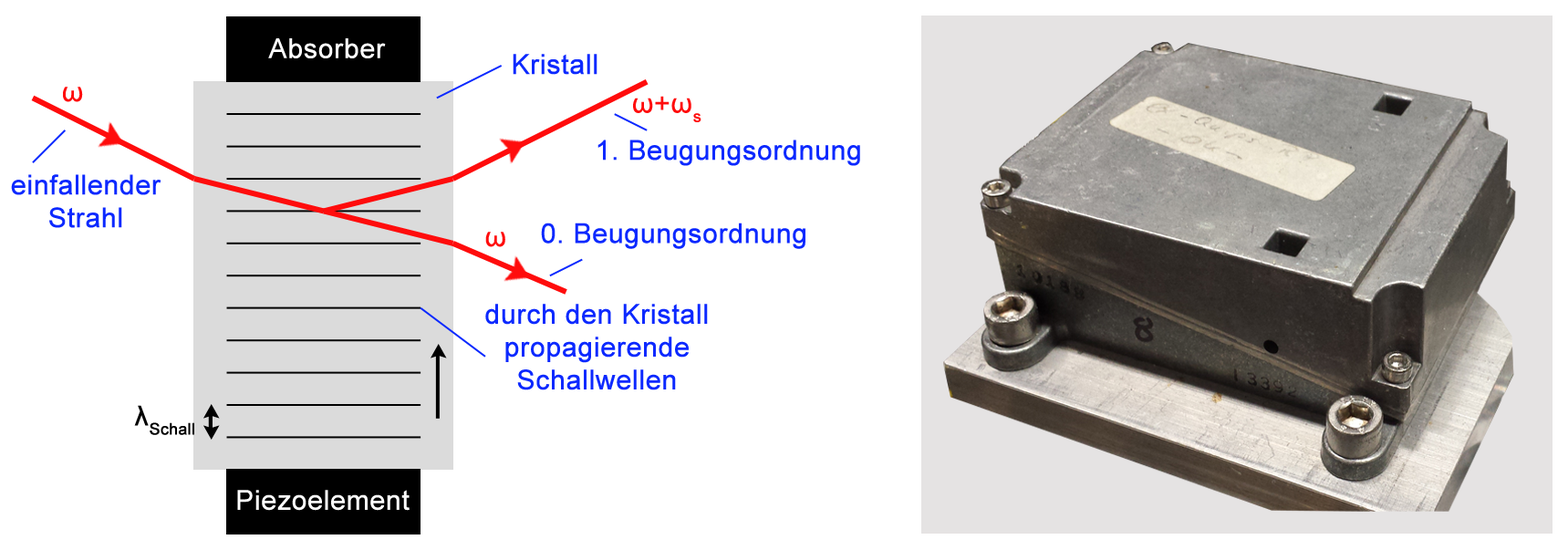
<style>
.page{position:relative;width:1568px;height:550px;background:#ffffff}
.page>*{position:absolute;margin:0}
.t1{font:27.4px "ArialMT";color:#ffffff;font-weight:bold}
.t2{font:27.4px "ArialMT";color:#0c29ff;font-weight:bold}
.t3{font:27.4px "ArialMT";color:#ff0c0c;font-weight:bold}
.t4{font:27.4px "ArialMT";color:#000000;font-weight:bold}
</style>
<div class="page">
<p class="t1" style="left:268px;top:38px;width:118px;height:20px">Absorber</p>
<p class="t2" style="left:513px;top:54px;width:84px;height:21px">Kristall</p>
<p class="t3" style="left:63px;top:87px;width:20px;height:15px">ω</p>
<p class="t3" style="left:633px;top:96px;width:68px;height:26px">ω+ωs</p>
<p class="t2" style="left:597px;top:140px;width:263px;height:26px">1. Beugungsordnung</p>
<p class="t2" style="left:11px;top:174px;width:150px;height:54px;text-align:center">einfallender<br>Strahl</p>
<p class="t3" style="left:485px;top:232px;width:20px;height:15px">ω</p>
<p class="t2" style="left:541px;top:223px;width:264px;height:26px">0. Beugungsordnung</p>
<p class="t2" style="left:485px;top:304px;width:223px;height:86px;text-align:center">durch den Kristall<br>propagierende<br>Schallwellen</p>
<p class="t4" style="left:134px;top:405px;width:60px;height:30px">λSchall</p>
<p class="t1" style="left:237px;top:490px;width:173px;height:21px">Piezoelement</p>
</div>
